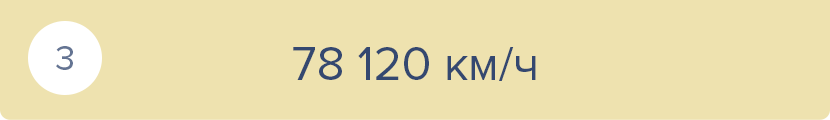
<style>
.page{position:relative;width:830px;height:120px;background:#eee2af}
.page>*{position:absolute;margin:0}
.t1{font:36px "ProximaNova-Regular";color:#647493}
.t2{font:48px "ProximaNova-Regular";color:#344870}
</style>
<div class="page">
<p class="t1" style="left:56px;top:46px;width:17px;height:24px">3</p>
<p class="t2" style="left:293px;top:47px;width:243px;height:34px">78 120 км/ч</p>
</div>
